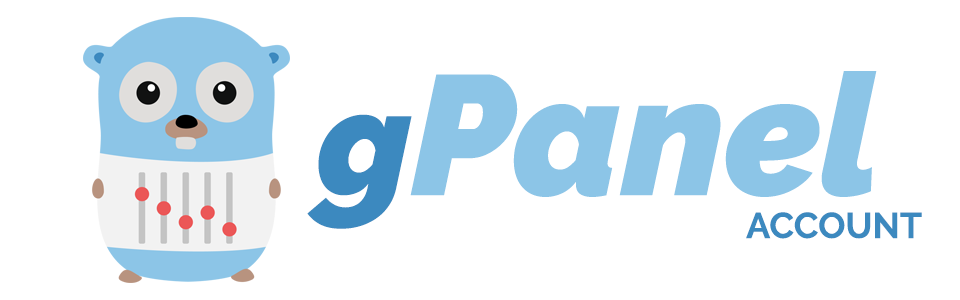
<style>
.page{position:relative;width:960px;height:300px;background:#ffffff}
.page>*{position:absolute;margin:0}
.t1{font:170px "Raleway-BlackItalic";color:#8cc5e7}
.t2{font:150px "Raleway-BlackItalic";color:#3c89bf}
.t3{font:36px "Raleway-Bold";color:#3c89bf}
</style>
<div class="page">
<p class="t1" style="left:307px;top:71px;width:570px;height:158px"><span class="t2">g</span>Panel</p>
<p class="t3" style="left:746px;top:212px;width:176px;height:27px">ACCOUNT</p>
</div>
